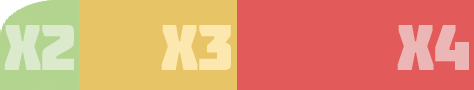
<style>
.page{position:relative;width:474px;height:90px;background:#e35a5a}
.page>*{position:absolute;margin:0}
.t1{font:64px "Molot";color:#dbe9cc}
.t2{font:64px "Molot";color:#fce7ae}
.t3{font:64px "Molot";color:#edb6b6}
</style>
<div class="page">
<p class="t1" style="left:4px;top:25px;width:70px;height:45px">X2</p>
<p class="t2" style="left:161px;top:25px;width:70px;height:45px">X3</p>
<p class="t3" style="left:397px;top:25px;width:72px;height:45px">X4</p>
</div>
